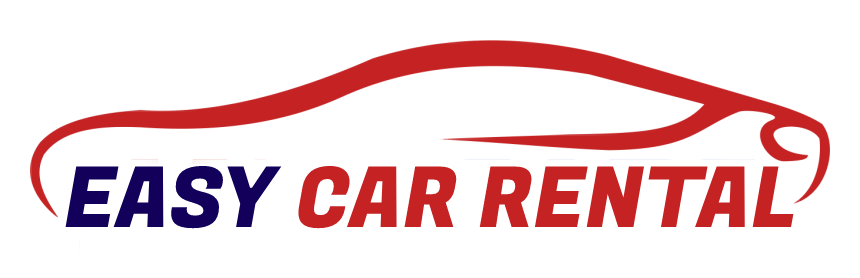
<style>
.page{position:relative;width:860px;height:278px;background:#ffffff}
.page>*{position:absolute;margin:0}
.t1{font:84px "FugazOne-Regular";color:#c42223}
.t2{font:84px "FugazOne-Regular";color:#13005b}
</style>
<div class="page">
<p class="t1" style="left:65px;top:165px;width:729px;height:64px"><span class="t2">EASY </span>CAR RENTAL</p>
</div>
